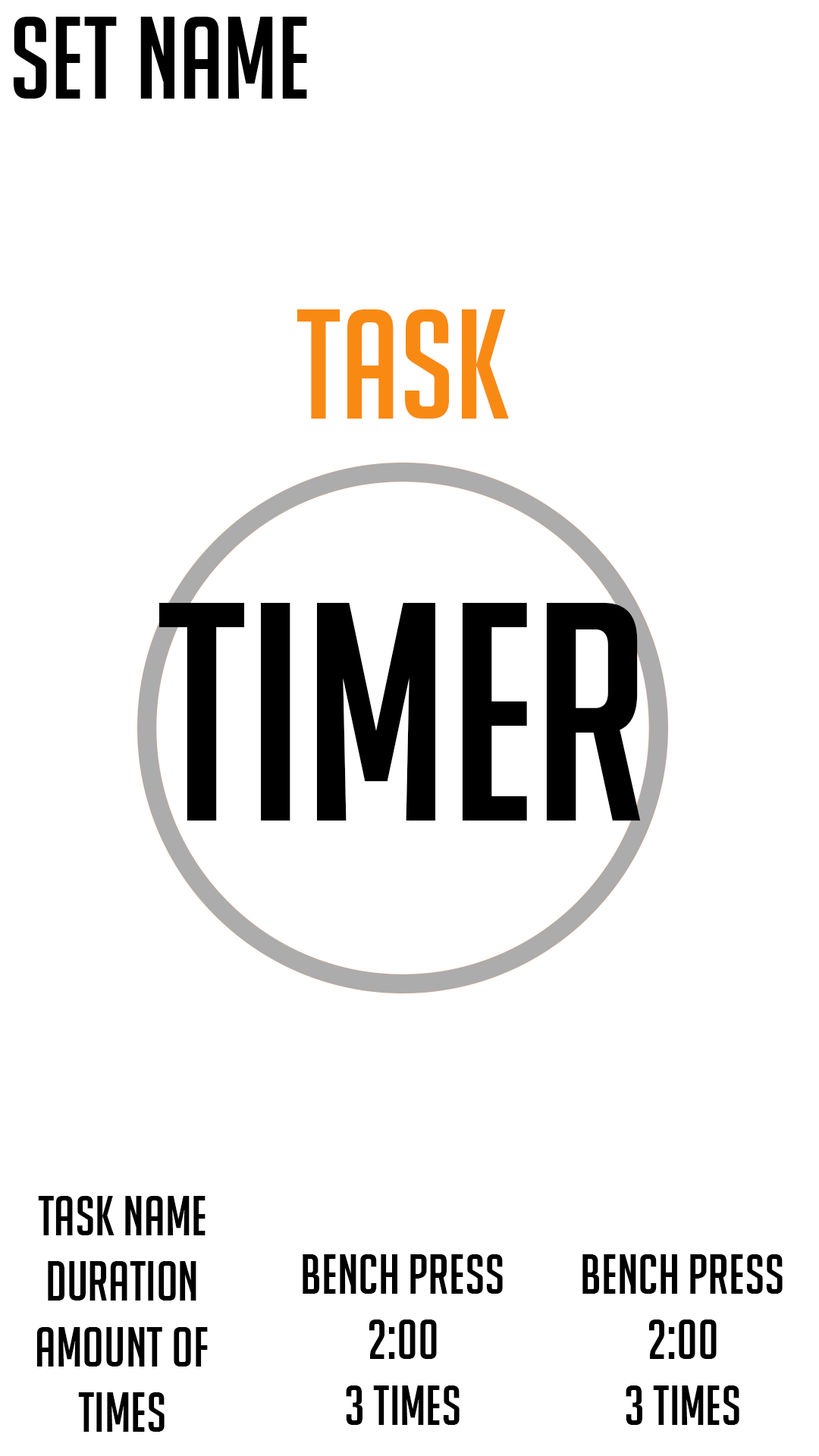
<style>
.page{position:relative;width:819px;height:1456px;background:#ffffff}
.page>*{position:absolute;margin:0}
.t1{font:113.7px "BigNoodleToo";color:#000000}
.t2{font:151.7px "BigNoodleToo";color:#f88a14}
.t3{font:303.3px "BigNoodleToo";color:#000000}
.t4{font:54.6px "BigNoodleToo";color:#000000}
</style>
<div class="page">
<p class="t1" style="left:13px;top:17px;width:294px;height:82px">Set name</p>
<p class="t2" style="left:297px;top:309px;width:212px;height:110px">Task</p>
<p class="t3" style="left:159px;top:603px;width:482px;height:218px">Timer</p>
<p class="t4" style="left:36px;top:1196px;width:172px;height:236px;text-align:center">Task name<br>Duration<br>amount of  times</p>
<p class="t4" style="left:303px;top:1254px;width:200px;height:171px;text-align:center">Bench press<br>2:00<br>3 times</p>
<p class="t4" style="left:582px;top:1254px;width:201px;height:171px;text-align:center">Bench press<br>2:00<br>3 times</p>
</div>
